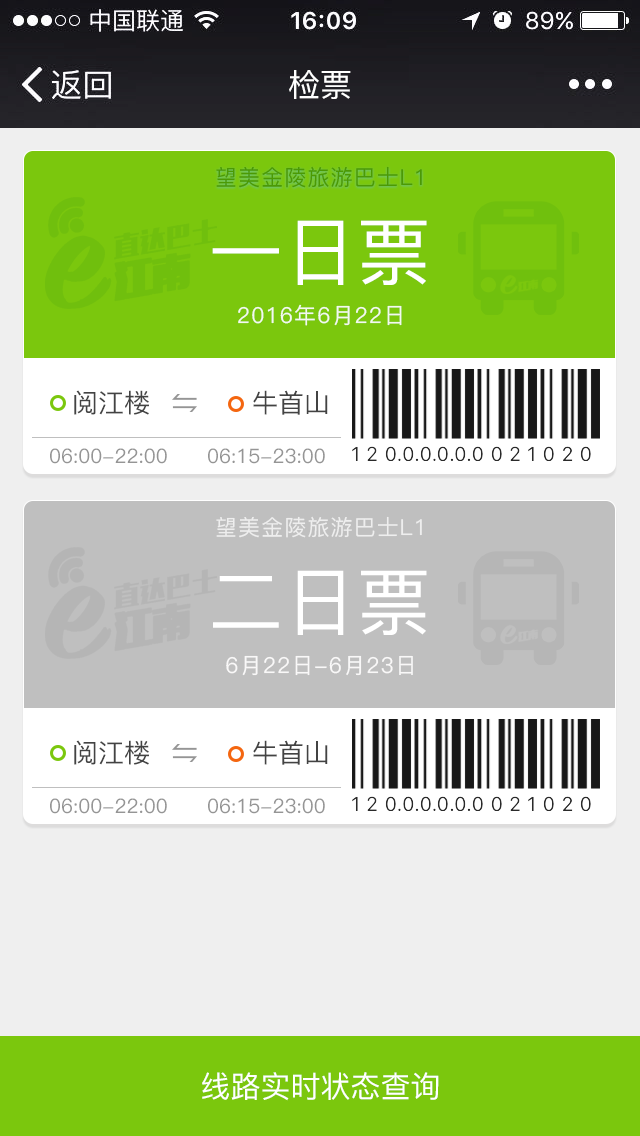
<style>
.page{position:relative;width:640px;height:1136px;background:#efefef}
.page>*{position:absolute;margin:0}
.t1{font:32px "PingFang-SC-Medium";color:#ffffff}
.t2{font:22px "PingFang-SC-Medium";letter-spacing:0.05em;color:#4b9a03}
.t3{font:73.7px "PingFang-SC-Medium";color:#ffffff}
.t4{font:22px "PingFang-SC-Medium";letter-spacing:0.05em;color:#fffefe}
.t5{font:26px "PingFang-SC-Medium";color:#434343}
.t6{font:20px "PingFang-SC-Medium";color:#959595}
.t7{font:22px "PingFang-SC-Medium";letter-spacing:0.05em;color:#ffffff}
.t8{font:30px "PingFang-SC-Medium";color:#ffffff}
</style>
<div class="page">
<p class="t1" style="left:289px;top:70px;width:62px;height:29px">检票</p>
<p class="t2" style="left:216px;top:166px;width:206px;height:22px">望美金陵旅游巴士L1</p>
<p class="t3" style="left:212px;top:220px;width:215px;height:65px">一日票</p>
<p class="t4" style="left:238px;top:304px;width:164px;height:22px;opacity:0.9">2016年6月22日</p>
<p class="t5" style="left:74px;top:390px;width:75px;height:25px">阅江楼</p>
<p class="t5" style="left:253px;top:390px;width:75px;height:25px">牛首山</p>
<p class="t6" style="left:50px;top:448px;width:117px;height:16px">06:00-22:00</p>
<p class="t6" style="left:208px;top:448px;width:117px;height:16px">06:15-23:00</p>
<p class="t7" style="left:216px;top:516px;width:206px;height:22px;opacity:0.71">望美金陵旅游巴士L1</p>
<p class="t3" style="left:213px;top:570px;width:214px;height:65px">二日票</p>
<p class="t4" style="left:226px;top:655px;width:187px;height:21px;opacity:0.9">6月22日-6月23日</p>
<p class="t5" style="left:74px;top:740px;width:75px;height:25px">阅江楼</p>
<p class="t5" style="left:253px;top:740px;width:75px;height:25px">牛首山</p>
<p class="t6" style="left:50px;top:798px;width:117px;height:16px">06:00-22:00</p>
<p class="t6" style="left:208px;top:798px;width:117px;height:16px">06:15-23:00</p>
<p class="t8" style="left:202px;top:1072px;width:237px;height:29px">线路实时状态查询</p>
</div>
